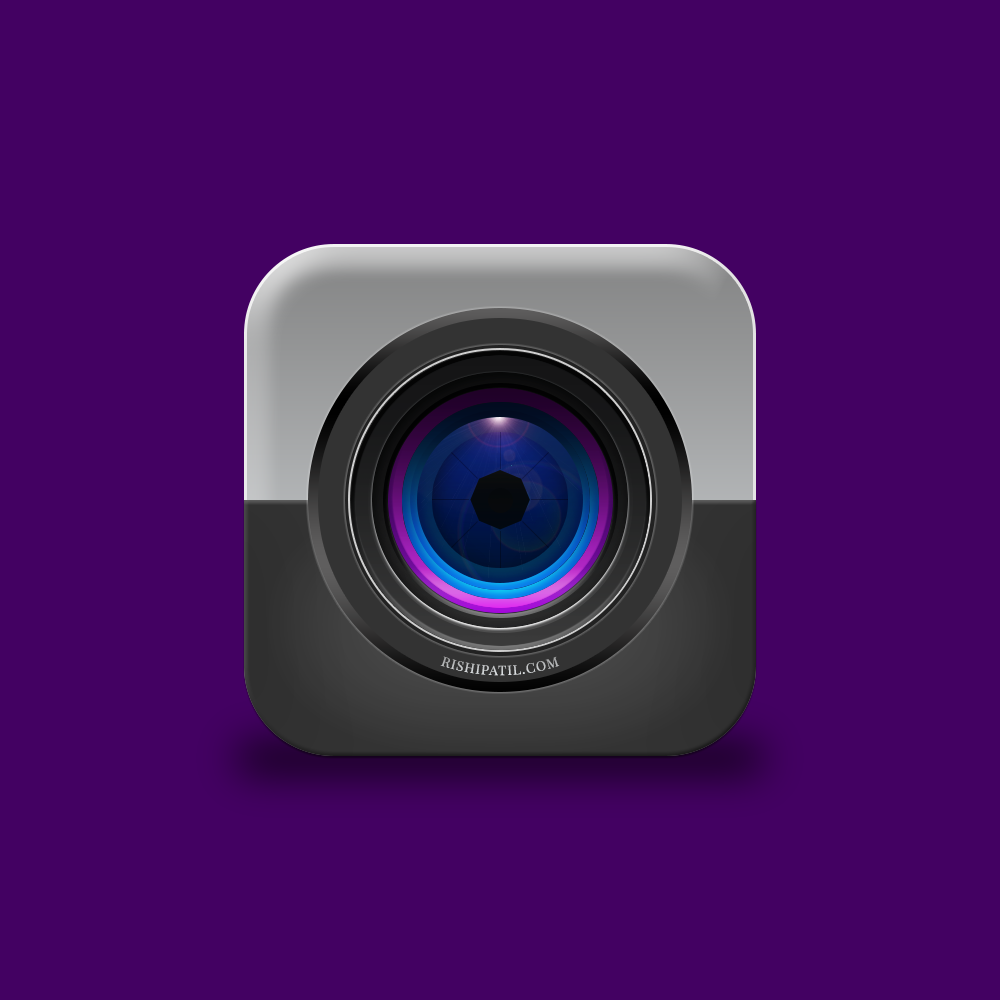
<style>
.page{position:relative;width:1000px;height:1000px;background:#430162}
.page>*{position:absolute;margin:0}
.t1{font:13px "PlayfairDisplay-Regular";letter-spacing:0.06em;color:#c5c7c9;text-transform:uppercase}
</style>
<div class="page">
<p class="t1" style="left:440px;top:656px;width:120px;height:20px">RishipatiL.com</p>
</div>
